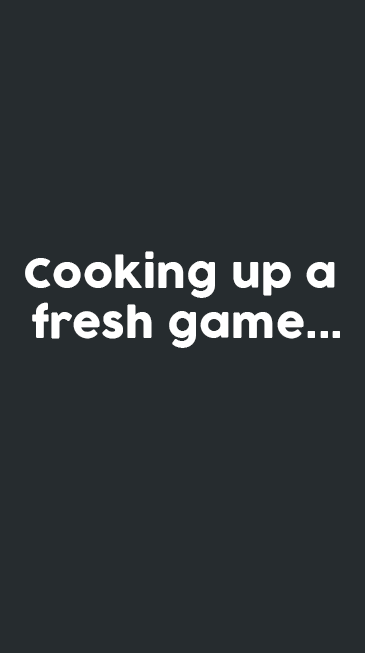
<style>
.page{position:relative;width:365px;height:653px;background:#262c2f}
.page>*{position:absolute;margin:0}
.t1{font:41.5px "Cocogoose";color:#ffffff}
</style>
<div class="page">
<p class="t1" style="left:25px;top:251px;width:315px;height:97px;text-align:center">Cooking up a <br>fresh game...</p>
</div>
